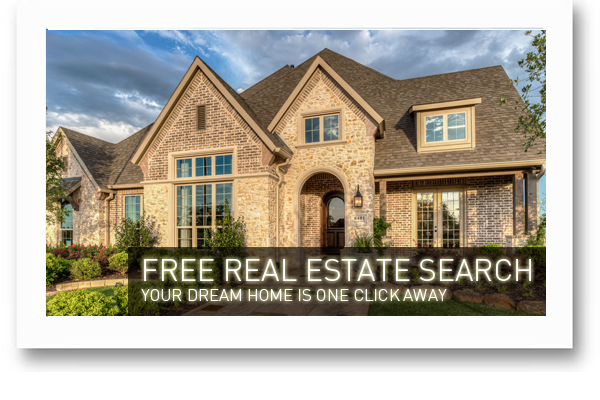
<style>
.page{position:relative;width:600px;height:400px}
.page>*{position:absolute;margin:0}
.t1{font:16.7px "DINPro-Light";color:#ffffff;text-transform:uppercase}
.t2{font:30.6px "DINPro-Light";color:#ffffff;text-transform:uppercase}
</style>
<div class="page">
<p class="t1" style="left:141px;top:259px;width:390px;height:42px"><span class="t2">FREE REAL ESTATE SEARCH<br></span>YOUR DREAM HOME is one click away</p>
</div>
